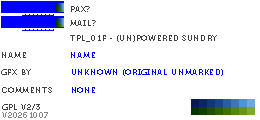
<style>
.page{position:relative;width:260px;height:120px;background:#ffffff}
.page>*{position:absolute;margin:0}
.t1{font:8px "Museo700-Regular";letter-spacing:0.075em;color:#404040;text-transform:uppercase}
.t2{font:8px "Museo700-Regular";letter-spacing:0.075em;color:#0000ff;text-transform:uppercase}
.t3{font:8px "Museo700-Regular";letter-spacing:0.075em;color:#848484;text-transform:uppercase}
</style>
<div class="page">
<p class="t1" style="left:71px;top:6px;width:19px;height:6px">pax?</p>
<p class="t1" style="left:70px;top:20px;width:26px;height:6px">mail?</p>
<p class="t1" style="left:70px;top:35px;width:147px;height:7px">tpl_01f - (un)powered sundry</p>
<p class="t1" style="left:2px;top:52px;width:24px;height:6px">name</p>
<p class="t2" style="left:71px;top:52px;width:24px;height:6px">name</p>
<p class="t1" style="left:1px;top:69px;width:30px;height:6px">gfx by</p>
<p class="t2" style="left:72px;top:69px;width:151px;height:7px">unknown (original unmarked)</p>
<p class="t1" style="left:2px;top:87px;width:50px;height:6px">comments</p>
<p class="t2" style="left:72px;top:87px;width:23px;height:6px">none</p>
<p class="t3" style="left:2px;top:112px;width:46px;height:6px">v20261007</p>
<p class="t1" style="left:2px;top:104px;width:38px;height:6px">gpl v2/3</p>
</div>
